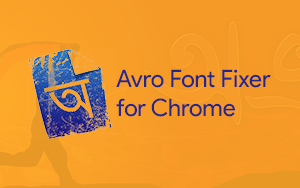
<style>
.page{position:relative;width:300px;height:188px}
.page>*{position:absolute;margin:0}
.t1{font:24px "ProductSans-Regular";color:#262689}
</style>
<div class="page">
<p class="t1" style="left:116px;top:69px;width:155px;height:48px">Avro Font Fixer<br>for Chrome</p>
</div>
